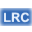
<style>
.page{position:relative;width:32px;height:32px;background:#ffffff}
.page>*{position:absolute;margin:0}
.t1{font:13px "Arial-BoldMT";color:#dde9f7}
</style>
<div class="page">
<p class="t1" style="left:4px;top:12px;width:26px;height:11px">LRC</p>
</div>
